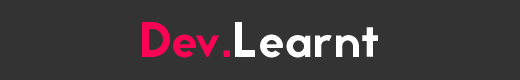
<style>
.page{position:relative;width:520px;height:80px;background:#333333}
.page>*{position:absolute;margin:0}
.t1{font:50px "Jaapokki-Regular";color:#ffffff}
.t2{font:50px "Jaapokki-Regular";color:#fc0254}
</style>
<div class="page">
<p class="t1" style="left:142px;top:22px;width:236px;height:36px"><span class="t2">Dev.</span>Learnt</p>
</div>
